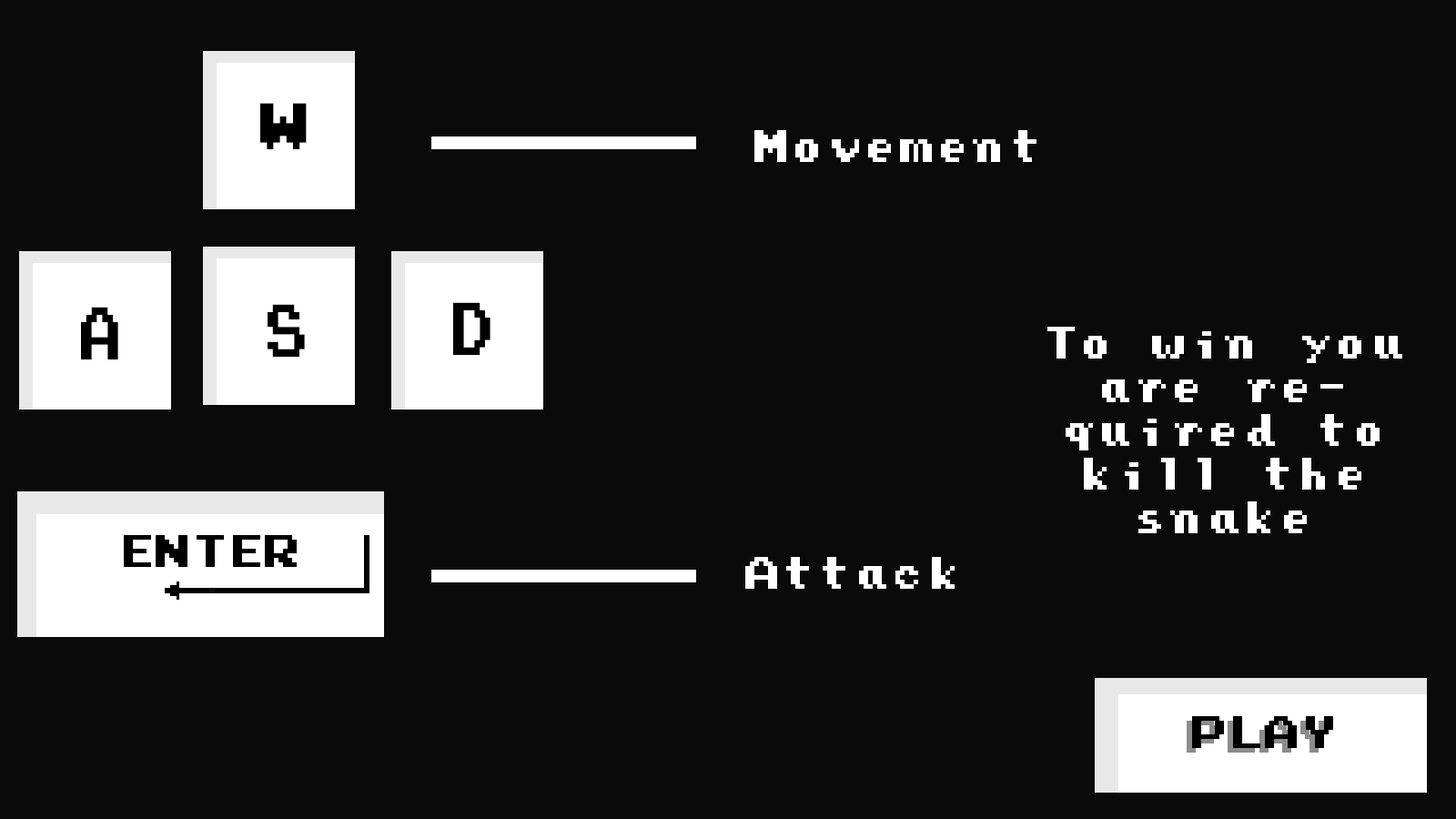
<style>
.page{position:relative;width:1456px;height:819px;background:#0a0a0a}
.page>*{position:absolute;margin:0}
.t1{font:52.5px "PressStartReg";color:#000000}
.t2{font:36.4px "PressStartReg";color:#ffffff}
.t3{font:59.6px "PressStartReg";color:#000000;scale:0.71 1}
.t4{font:36.4px "PressStartReg";color:#000000}
</style>
<div class="page">
<p class="t1" style="left:260px;top:103px;width:47px;height:46px">W</p>
<p class="t2" style="left:754px;top:130px;width:282px;height:32px">Movement</p>
<p class="t3" style="left:268px;top:304px;width:37px;height:53px">S</p>
<p class="t3" style="left:453px;top:302px;width:37px;height:53px">D</p>
<p class="t3" style="left:81px;top:307px;width:37px;height:52px">A</p>
<p class="t2" style="left:1047px;top:327px;width:355px;height:206px;text-align:center">To win you are required to kill the snake</p>
<p class="t4" style="left:124px;top:535px;width:173px;height:32px">ENTER</p>
<p class="t2" style="left:745px;top:557px;width:210px;height:32px">Attack</p>
<p class="t4" style="left:1192px;top:716px;width:141px;height:32px">PLAY</p>
</div>
